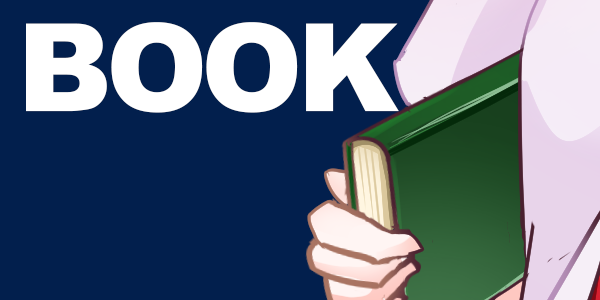
<style>
.page{position:relative;width:600px;height:300px;background:#021f4d}
.page>*{position:absolute;margin:0}
.t1{font:121.9px "Arial-Black";letter-spacing:-0.05em;color:#ffffff}
</style>
<div class="page">
<p class="t1" style="left:26px;top:22px;width:373px;height:91px">BOOK</p>
</div>
